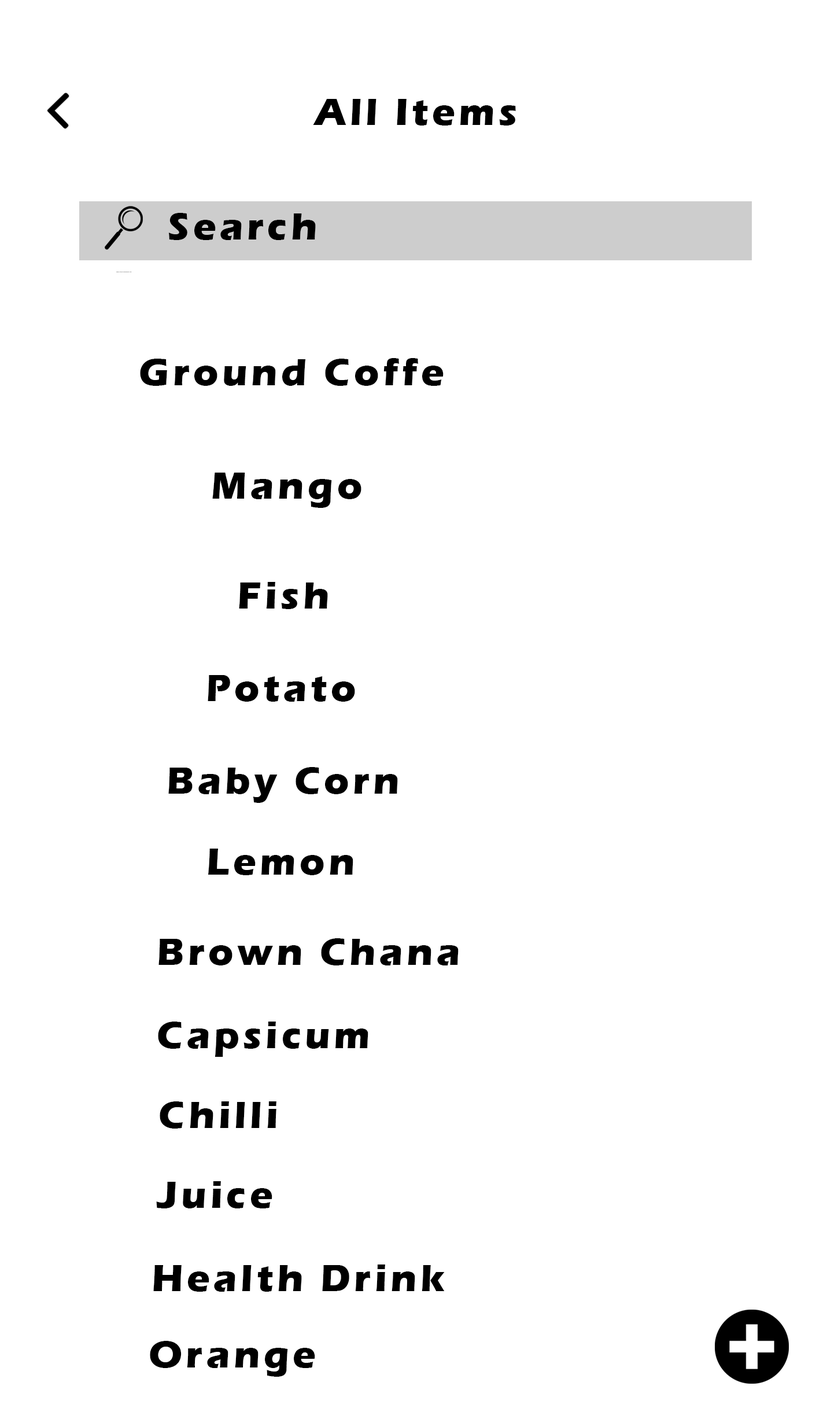
<style>
.page{position:relative;width:838px;height:1423px;background:#ffffff}
.page>*{position:absolute;margin:0}
.t1{font:38.6px "ErasITC-Bold";letter-spacing:0.1em;color:#000000}
</style>
<div class="page">
<p class="t1" style="left:313px;top:99px;width:203px;height:27px">All Items</p>
<p class="t1" style="left:168px;top:213px;width:148px;height:27px">Search</p>
<p class="t1" style="left:140px;top:358px;width:304px;height:28px">Ground Coffe</p>
<p class="t1" style="left:212px;top:473px;width:149px;height:35px">Mango</p>
<p class="t1" style="left:239px;top:582px;width:89px;height:27px">Fish</p>
<p class="t1" style="left:208px;top:675px;width:147px;height:27px">Potato</p>
<p class="t1" style="left:168px;top:767px;width:230px;height:36px">Baby Corn</p>
<p class="t1" style="left:208px;top:848px;width:145px;height:27px">Lemon</p>
<p class="t1" style="left:158px;top:938px;width:301px;height:27px">Brown Chana</p>
<p class="t1" style="left:158px;top:1021px;width:210px;height:36px">Capsicum</p>
<p class="t1" style="left:160px;top:1101px;width:116px;height:27px">Chilli</p>
<p class="t1" style="left:156px;top:1181px;width:116px;height:27px">Juice</p>
<p class="t1" style="left:153px;top:1264px;width:292px;height:28px">Health Drink</p>
<p class="t1" style="left:150px;top:1341px;width:165px;height:36px">Orange</p>
</div>
